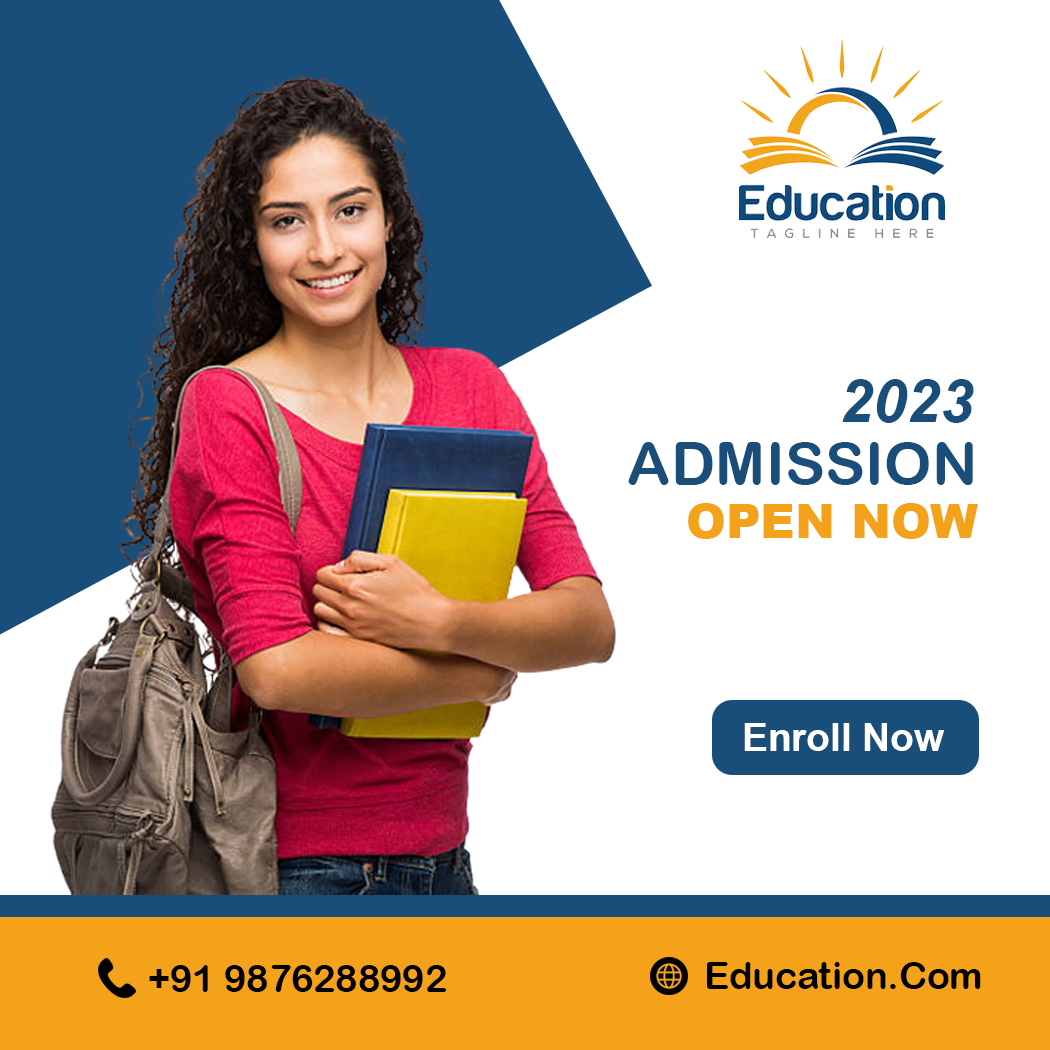
<style>
.page{position:relative;width:1050px;height:1050px;background:#ffffff}
.page>*{position:absolute;margin:0}
.t1{font:60.3px "Arial-BoldItalicMT";color:#1a4e7a}
.t2{font:60.3px "ArialRoundedMTBold";color:#1a4e7a}
.t3{font:47.8px "Arial-Black";color:#f3a219}
.t4{font:38.7px "Arial-BoldMT";color:#ffffff}
.t5{font:37.5px "ArialRoundedMTBold";color:#000000}
</style>
<div class="page">
<p class="t1" style="left:842px;top:379px;width:132px;height:44px">2023</p>
<p class="t2" style="left:628px;top:442px;width:345px;height:43px">ADMISSION</p>
<p class="t3" style="left:688px;top:503px;width:290px;height:36px">OPEN NOW</p>
<p class="t4" style="left:744px;top:723px;width:201px;height:28px">Enroll Now</p>
<p class="t5" style="left:149px;top:965px;width:298px;height:27px">+91 9876288992</p>
<p class="t5" style="left:707px;top:962px;width:274px;height:27px">Education.Com</p>
</div>
